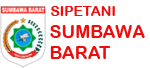
<style>
.page{position:relative;width:150px;height:68px;background:#ffffff}
.page>*{position:absolute;margin:0}
.t1{font:14px "ArialRoundedMTBold";color:#ef0c0c}
.t2{font:18px "ArialRoundedMTBold";color:#ef0c0c}
</style>
<div class="page">
<p class="t1" style="left:51px;top:6px;width:64px;height:10px">SIPETANI</p>
<p class="t2" style="left:50px;top:25px;width:95px;height:34px">SUMBAWA<br>BARAT</p>
</div>
